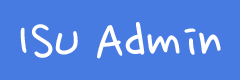
<style>
.page{position:relative;width:240px;height:80px;background:#487be1}
.page>*{position:absolute;margin:0}
.t1{font:60px "NanumPenOTF";color:#ffffff}
</style>
<div class="page">
<p class="t1" style="left:20px;top:22px;width:201px;height:37px">ISU Admin</p>
</div>
